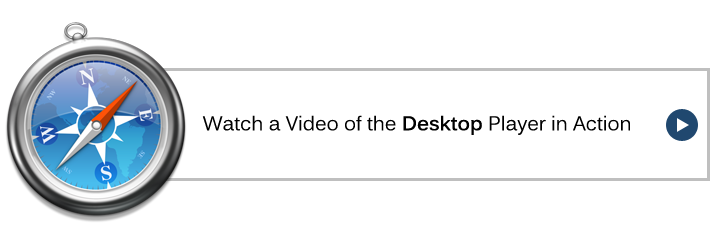
<style>
.page{position:relative;width:710px;height:250px;background:#ffffff}
.page>*{position:absolute;margin:0}
.t1{font:19.7px "Kalinga";color:#000000}
.t2{font:19.7px "Kalinga-Bold";color:#000000}
</style>
<div class="page">
<p class="t1" style="left:202px;top:115px;width:428px;height:20px">Watch a Video of the <span class="t2">Desktop</span> Player in Action</p>
</div>
